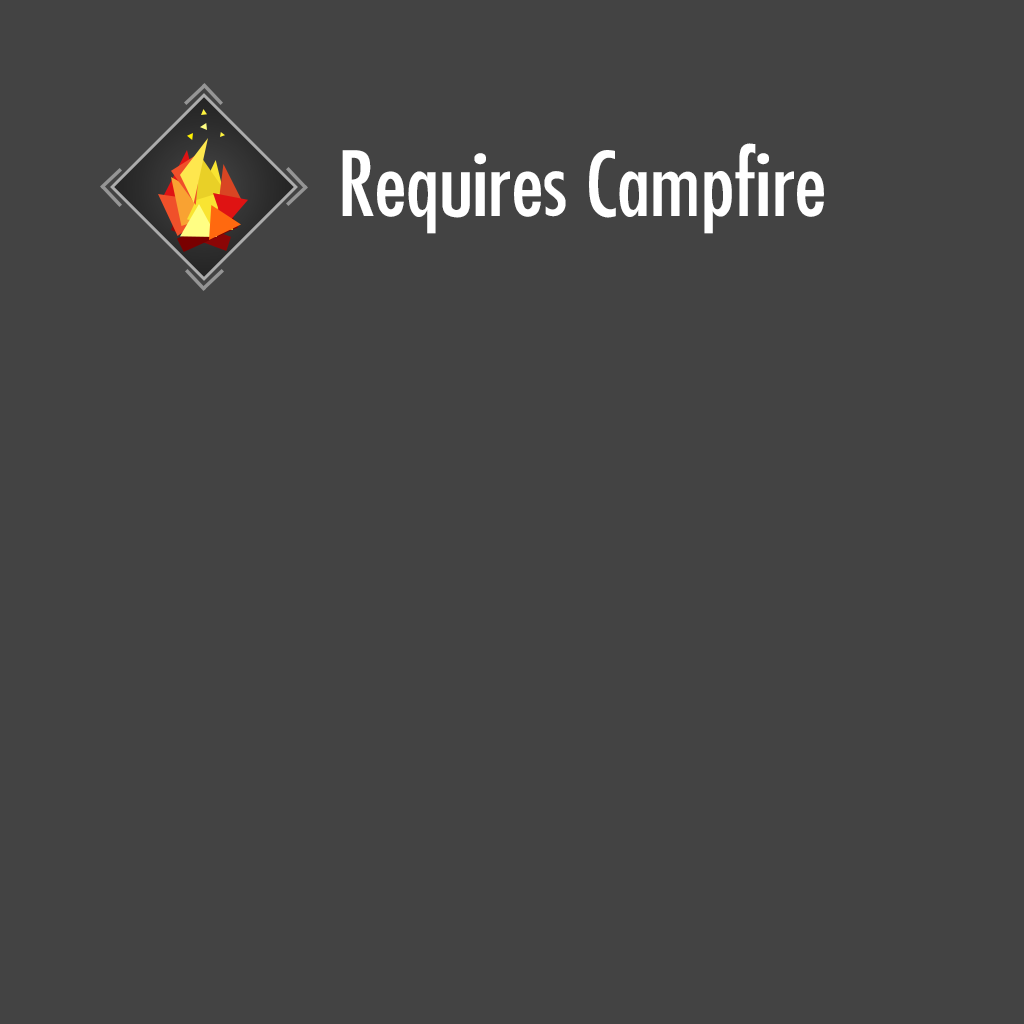
<style>
.page{position:relative;width:1024px;height:1024px;background:#434343}
.page>*{position:absolute;margin:0}
.t1{font:87px "Futura-Condensed-Normal";color:#ffffff}
</style>
<div class="page">
<p class="t1" style="left:342px;top:143px;width:482px;height:91px">Requires Campfire</p>
</div>
